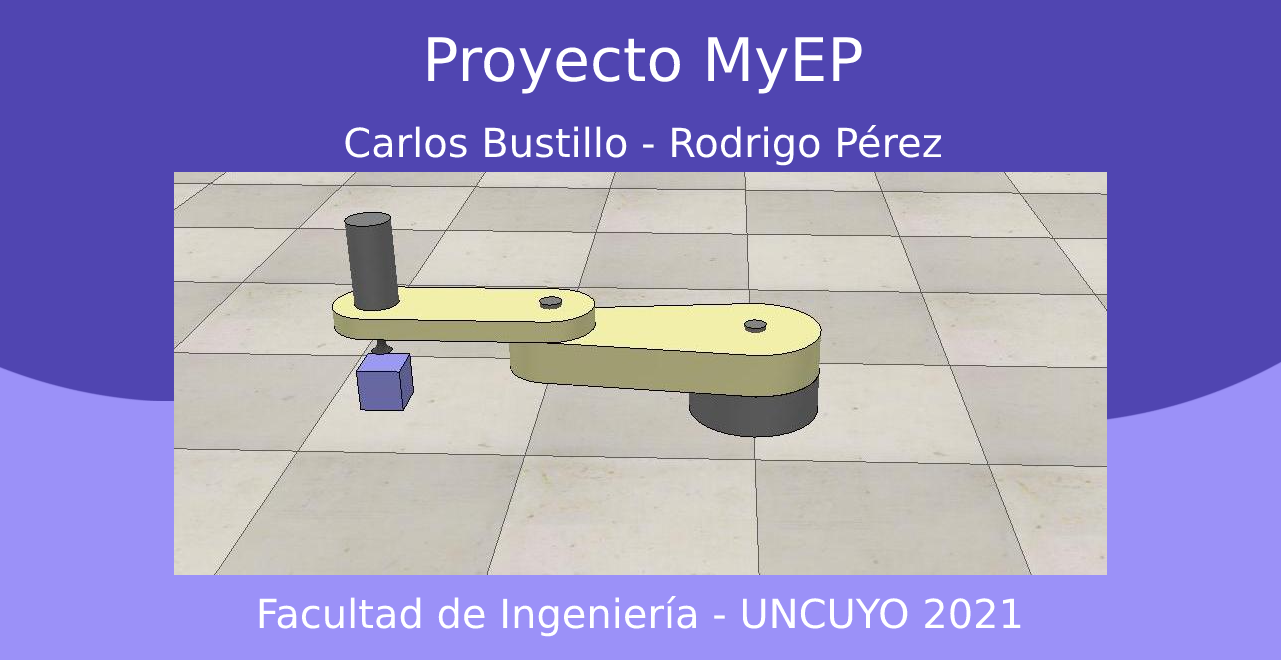
<style>
.page{position:relative;width:1281px;height:660px;background:#5045b1}
.page>*{position:absolute;margin:0}
.t1{font:40px "DejaVuSans";color:#ffffff}
.t2{font:60px "DejaVuSans";color:#ffffff}
</style>
<div class="page">
<p class="t1" style="left:345px;top:37px;width:597px;height:129px;text-align:center"><span class="t2">Proyecto MyEP<br><br></span>Carlos Bustillo - Rodrigo Pérez</p>
<p class="t1" style="left:259px;top:596px;width:762px;height:41px">Facultad de Ingeniería - UNCUYO 2021</p>
</div>
